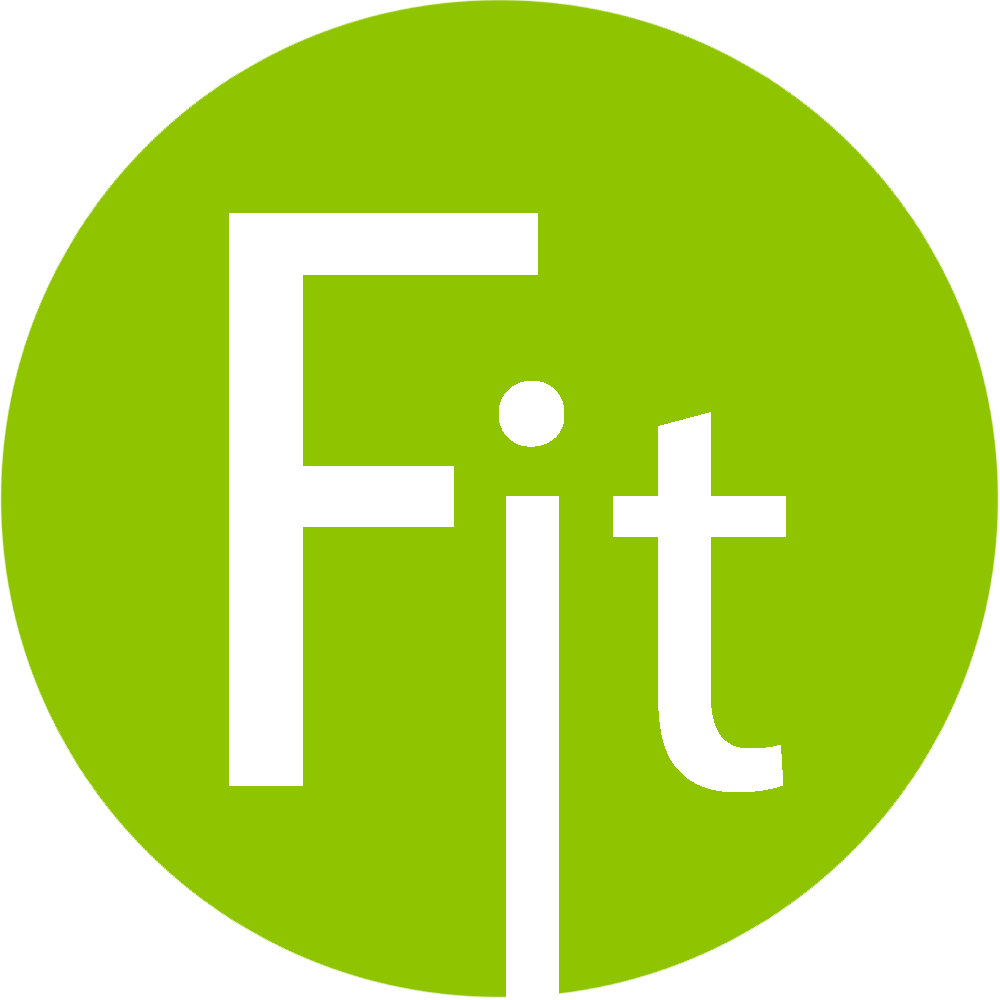
<style>
.page{position:relative;width:1000px;height:1000px;background:#8ec400}
.page>*{position:absolute;margin:0}
.t1{font:600px "MyriadPro-Regular";color:#ffffff}
</style>
<div class="page">
<p class="t1" style="left:499px;top:381px;width:287px;height:411px">it</p>
</div>
